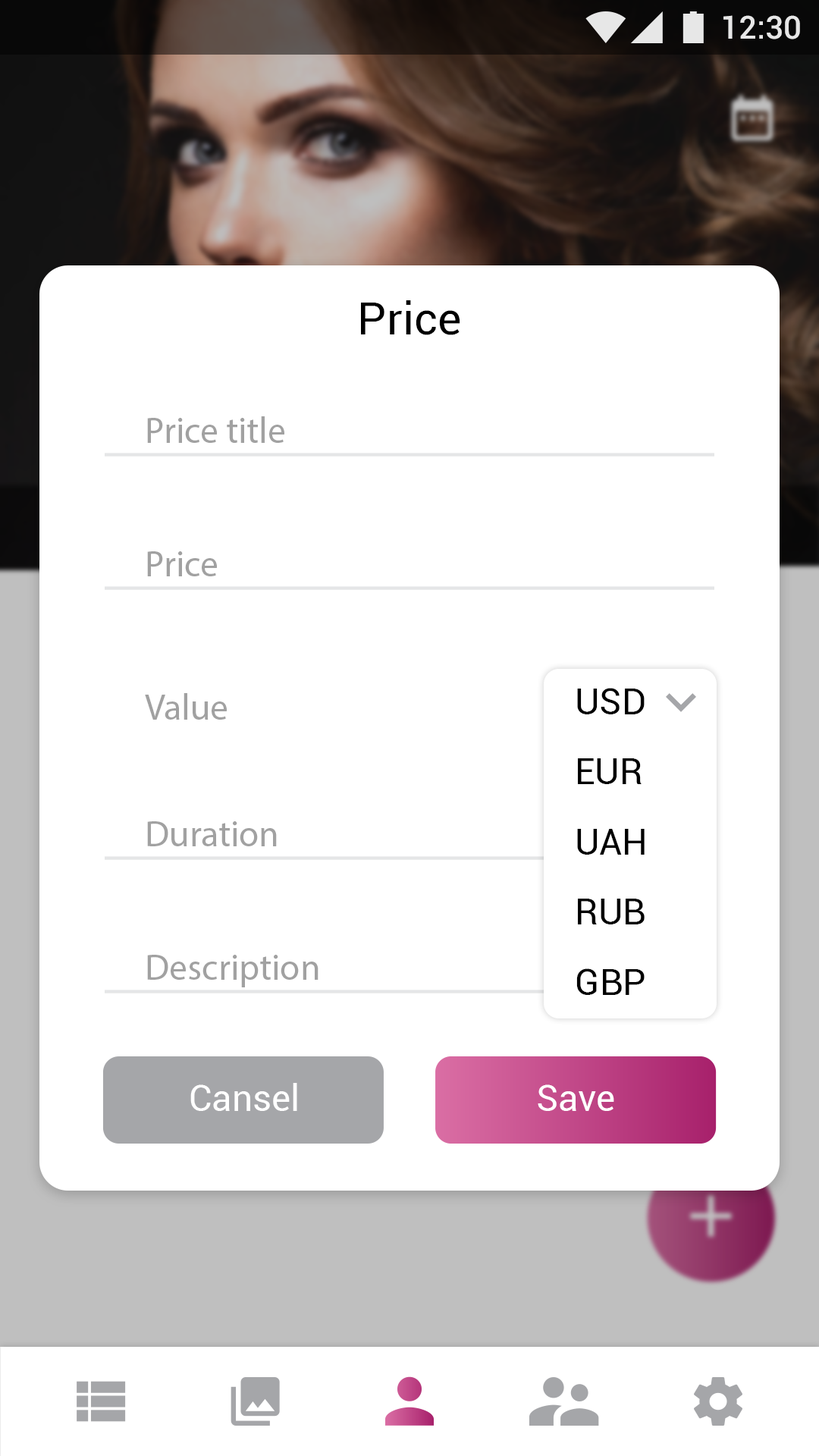
<style>
.page{position:relative;width:819px;height:1456px;background:#ffffff}
.page>*{position:absolute;margin:0}
.t1{font:31.8px "Roboto-Medium";color:#ffffff}
.t2{font:45.5px "Roboto-Regular";color:#000000}
.t3{font:36.4px "MyriadPro-Regular";color:#a1a1a1}
.t4{font:36.4px "Roboto-Regular";color:#000000}
.t5{font:36.4px "Roboto-Regular";color:#ffffff}
</style>
<div class="page">
<p class="t1" style="left:723px;top:15px;width:77px;height:24px">12:30</p>
<p class="t2" style="left:361px;top:300px;width:99px;height:35px">Price</p>
<p class="t3" style="left:147px;top:416px;width:137px;height:27px">Price title</p>
<p class="t3" style="left:147px;top:551px;width:70px;height:25px">Price</p>
<p class="t4" style="left:577px;top:688px;width:68px;height:26px">USD</p>
<p class="t3" style="left:145px;top:693px;width:82px;height:27px">Value</p>
<p class="t4" style="left:578px;top:758px;width:64px;height:26px">EUR</p>
<p class="t3" style="left:147px;top:821px;width:130px;height:25px">Duration</p>
<p class="t4" style="left:577px;top:829px;width:68px;height:26px">UAH</p>
<p class="t4" style="left:578px;top:899px;width:67px;height:25px">RUB</p>
<p class="t3" style="left:147px;top:955px;width:171px;height:32px">Description</p>
<p class="t4" style="left:576px;top:968px;width:69px;height:27px">GBP</p>
<p class="t5" style="left:190px;top:1083px;width:107px;height:28px">Cansel</p>
<p class="t5" style="left:538px;top:1084px;width:76px;height:27px">Save</p>
</div>
